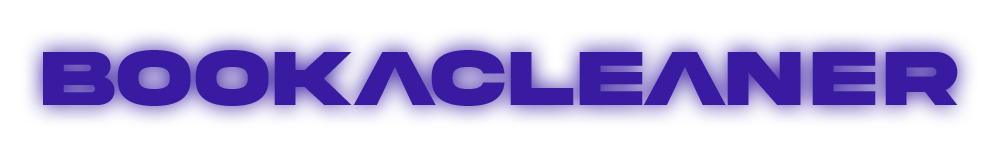
<style>
.page{position:relative;width:1000px;height:157px;background:#ffffff}
.page>*{position:absolute;margin:0}
.t1{font:81.2px "AkiraExpanded-SuperBold";color:#381ba0}
</style>
<div class="page">
<p class="t1" style="left:43px;top:50px;width:915px;height:56px">BOOKACLEANER</p>
</div>
